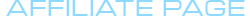
<style>
.page{position:relative;width:250px;height:16px;background:#ffffff}
.page>*{position:absolute;margin:0}
.t1{font:24px "MicrogrammaD-MediExte";letter-spacing:0.075em;color:#8dd9ff;text-transform:uppercase}
</style>
<div class="page">
<p class="t1" style="left:6px;top:0px;width:239px;height:16px">Affiliate page</p>
</div>
